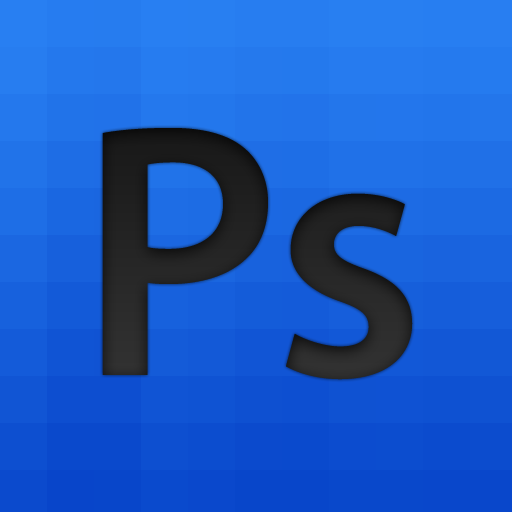
<style>
.page{position:relative;width:512px;height:512px}
.page>*{position:absolute;margin:0}
.t1{font:364px "MyriadPro-Semibold";color:#212121}
</style>
<div class="page">
<p class="t1" style="left:102px;top:128px;width:311px;height:252px">Ps</p>
</div>
